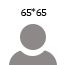
<style>
.page{position:relative;width:65px;height:65px;background:#ffffff}
.page>*{position:absolute;margin:0}
.t1{font:10.6px "CambriaMath";letter-spacing:-0.04em;color:#000000}
</style>
<div class="page">
<p class="t1" style="left:21px;top:8px;width:26px;height:8px">65*65</p>
</div>
